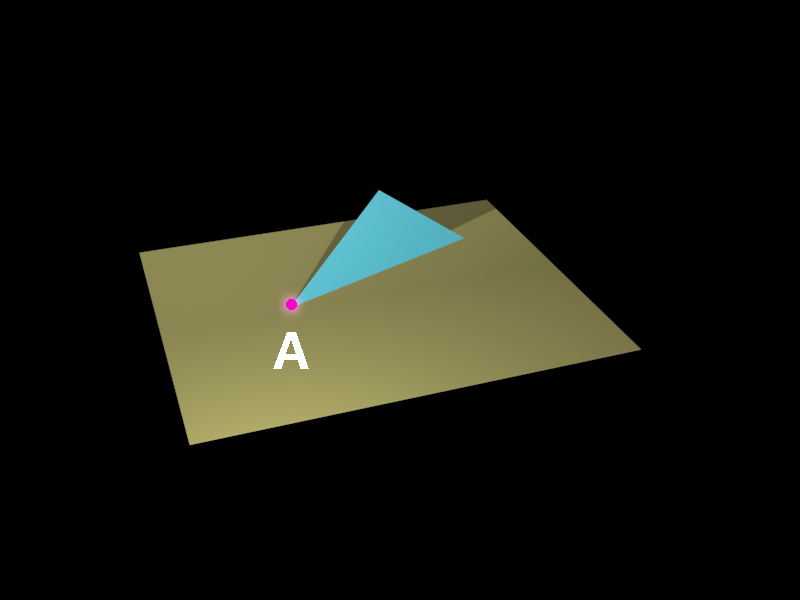
<style>
.page{position:relative;width:800px;height:600px;background:#000000}
.page>*{position:absolute;margin:0}
.t1{font:48px "MicrosoftYaHei-Bold";color:#ffffff}
</style>
<div class="page">
<p class="t1" style="left:273px;top:332px;width:36px;height:37px">A</p>
</div>
